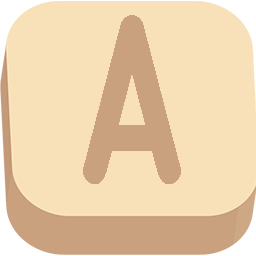
<style>
.page{position:relative;width:256px;height:256px;background:#f8e1b8}
.page>*{position:absolute;margin:0}
.t1{font:225px "Instruction-Bold";color:#c9a17e;scale:0.85 1}
</style>
<div class="page">
<p class="t1" style="left:83px;top:15px;width:98px;height:169px">A</p>
</div>
